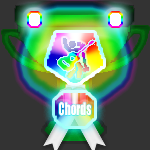
<style>
.page{position:relative;width:150px;height:150px;background:#333333}
.page>*{position:absolute;margin:0}
.t1{font:24.2px "Impact";scale:1.16 1}
.t2{font:15.8px "Impact";color:#fefffe;scale:0.71 1}
</style>
<div class="page">
<p class="t1" style="left:61px;top:88px;width:25px;height:21px">10</p>
<p class="t2" style="left:59px;top:102px;width:32px;height:14px;opacity:0.97">Chords</p>
</div>
